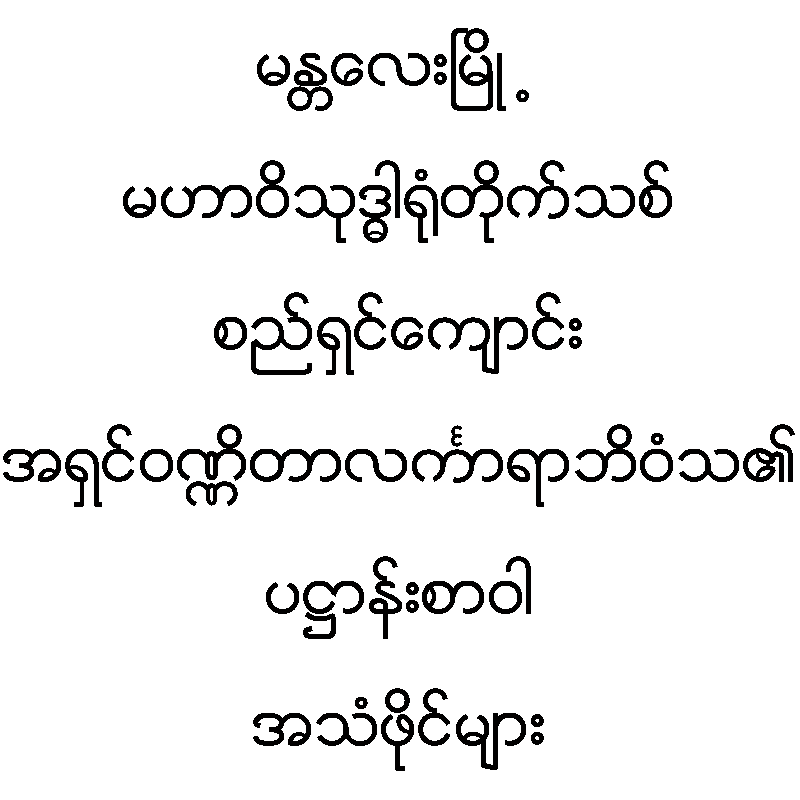
<style>
.page{position:relative;width:800px;height:800px;background:#ffffff}
.page>*{position:absolute;margin:0}
.t1{font:61.1px/131.9px "Zawgyi-One";color:#010000}
</style>
<div class="page">
<p class="t1" style="left:3px;top:28px;width:792px;height:743px;text-align:center">မႏၲေလးၿမိဳ  ့ မဟာဝိသုဒၶါ႐ုံတိုက္သစ္<br>စည္ရွင္ေက်ာင္း အရွင္ဝဏၰိတာလကၤာရာဘိဝံသ၏ ပ႒ာန္းစာဝါ<br>အသံဖိုင္မ်ား</p>
</div>
